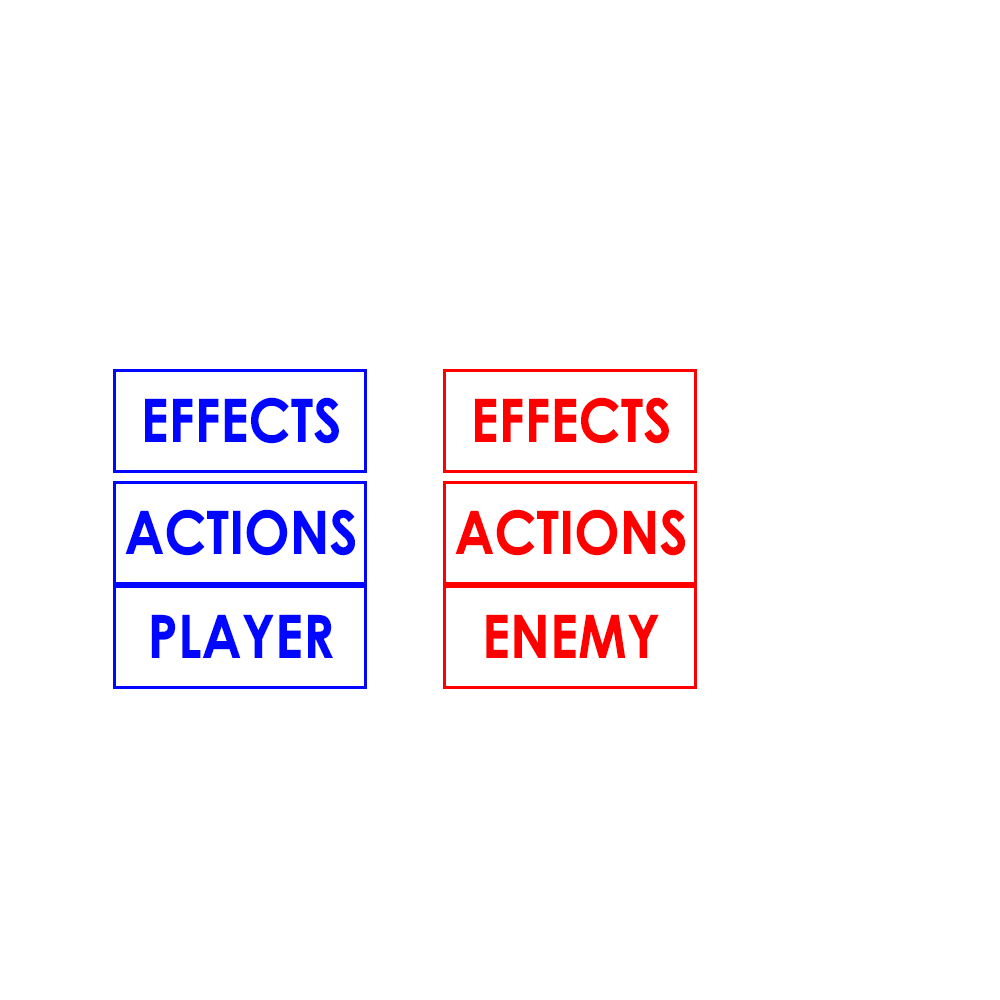
<style>
.page{position:relative;width:1000px;height:1000px;background:#ffffff}
.page>*{position:absolute;margin:0}
.t1{font:60px "CenturyGothic-Bold";color:#0006ff;scale:0.9 1}
.t2{font:60px "CenturyGothic-Bold";color:#ff0000;scale:0.9 1}
</style>
<div class="page">
<p class="t1" style="left:145px;top:397px;width:194px;height:47px">EFFECTS</p>
<p class="t2" style="left:475px;top:397px;width:194px;height:47px">EFFECTS</p>
<p class="t1" style="left:125px;top:509px;width:230px;height:47px">ACTIONS</p>
<p class="t2" style="left:455px;top:509px;width:230px;height:47px">ACTIONS</p>
<p class="t1" style="left:151px;top:614px;width:182px;height:44px">PLAYER</p>
<p class="t2" style="left:486px;top:614px;width:173px;height:44px">ENEMY</p>
</div>
